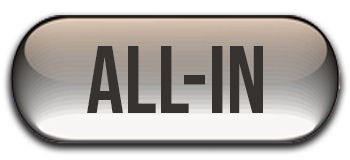
<style>
.page{position:relative;width:350px;height:160px}
.page>*{position:absolute;margin:0}
.t1{font:95.2px "BebasNeue-Regular";color:#36322f}
</style>
<div class="page">
<p class="t1" style="left:87px;top:46px;width:176px;height:67px">all-in</p>
</div>
